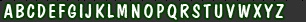
<style>
.page{position:relative;width:306px;height:22px;background:#333333}
.page>*{position:absolute;margin:0}
.t1{font:19.7px "DomCasualBT-Regular";letter-spacing:0.13em;color:#ffffff;font-variant:small-caps}
.t2{font:19.7px "DomCasualBT-Regular";letter-spacing:0.09em;color:#ffffff;font-variant:small-caps}
</style>
<div class="page">
<p class="t1" style="left:4px;top:3px;width:280px;height:17px"><span class="t2">ABCDEFGI</span>JKLMNOPQRSTUVWXYZ</p>
</div>
